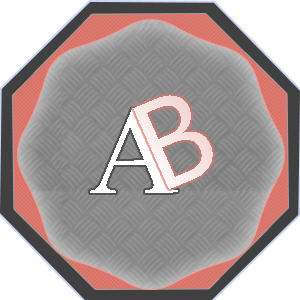
<style>
.page{position:relative;width:300px;height:300px}
.page>*{position:absolute;margin:0}
.t1{font:126.7px "MicrosoftNewTaiLue";letter-spacing:0.6em;color:#f8e8e6;text-transform:uppercase}
.t2{font:125px "MongolianBaiti";letter-spacing:0.6em;color:#ffffff;text-transform:uppercase}
</style>
<div class="page">
<p class="t1" style="left:133px;top:95px;width:80px;height:94px;rotate:-22deg">b</p>
<p class="t2" style="left:90px;top:108px;width:88px;height:85px">a</p>
</div>
